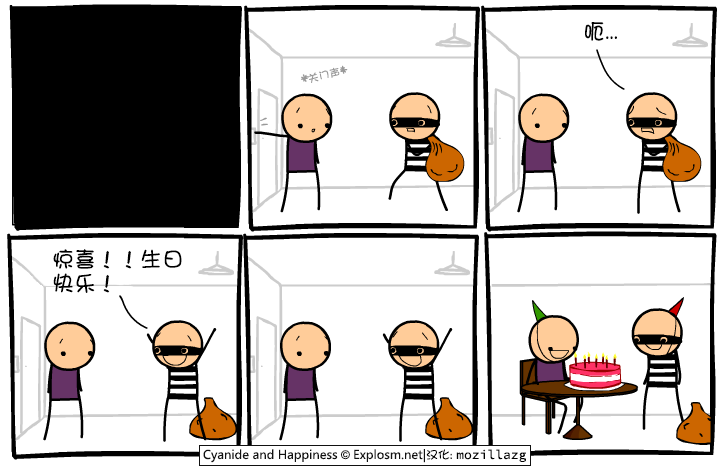
<style>
.page{position:relative;width:720px;height:470px;background:#ffffff}
.page>*{position:absolute;margin:0}
.t1{font:22px "DFGirl";color:#000000}
.t2{font:11px "DFGirl";color:#999999}
.t3{font:22px/24px "DFGirl";color:#000000}
</style>
<div class="page">
<p class="t1" style="left:585px;top:22px;width:32px;height:19px">呃...</p>
<p class="t2" style="left:309px;top:67px;width:31px;height:16px;rotate:-13deg">关门声</p>
<p class="t3" style="left:53px;top:249px;width:129px;height:44px">惊喜！！生日<br>快乐！</p>
</div>
